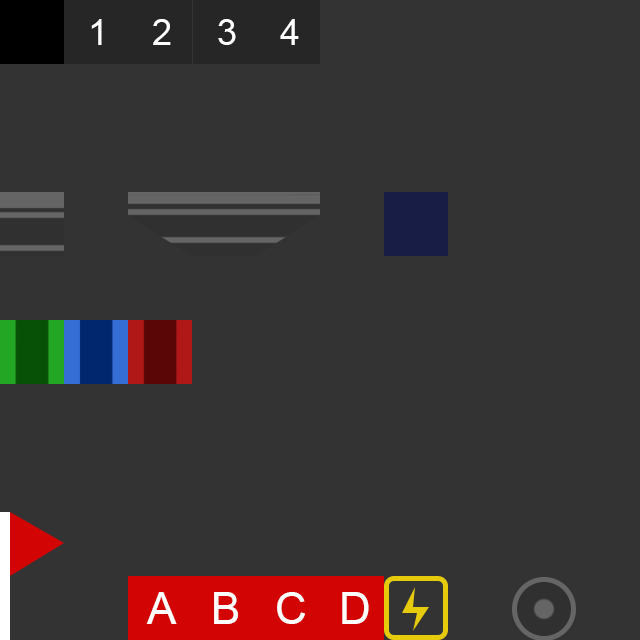
<style>
.page{position:relative;width:640px;height:640px;background:#333333}
.page>*{position:absolute;margin:0}
.t1{font:36px "ArialMT";letter-spacing:0.1em;color:#ffffff}
.t2{font:44px "ArialMT";letter-spacing:0.1em;color:#ffffff}
</style>
<div class="page">
<p class="t1" style="left:91px;top:19px;width:11px;height:26px">1</p>
<p class="t1" style="left:153px;top:19px;width:18px;height:26px">2</p>
<p class="t1" style="left:218px;top:19px;width:18px;height:26px">3</p>
<p class="t1" style="left:280px;top:19px;width:19px;height:26px">4</p>
<p class="t2" style="left:146px;top:592px;width:31px;height:32px">A</p>
<p class="t2" style="left:214px;top:592px;width:24px;height:32px">B</p>
<p class="t2" style="left:277px;top:592px;width:28px;height:32px">C</p>
<p class="t2" style="left:342px;top:592px;width:27px;height:32px">D</p>
</div>
